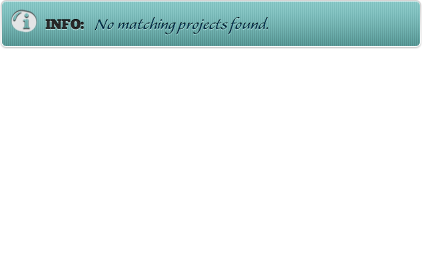
<style>
.page{position:relative;width:423px;height:254px;background:#ffffff}
.page>*{position:absolute;margin:0}
.t1{font:18px "AlexaStd";color:#002f4e}
.t2{font:14px "ChunkFive-Roman";color:#282828;text-transform:uppercase}
</style>
<div class="page">
<p class="t1" style="left:95px;top:17px;width:173px;height:18px">No matching projects found.</p>
<p class="t2" style="left:45px;top:19px;width:39px;height:11px">info:</p>
</div>
